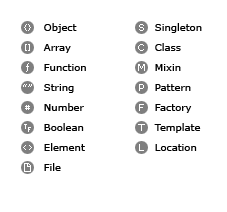
<style>
.page{position:relative;width:227px;height:212px;background:#ffffff}
.page>*{position:absolute;margin:0}
.t1{font:10px/20px "Verdana";color:#000000}
</style>
<div class="page">
<p class="t1" style="left:43px;top:23px;width:43px;height:148px">Object<br>Array<br>Function<br>String<br>Number<br>Boolean<br>Element<br>File</p>
<p class="t1" style="left:154px;top:23px;width:48px;height:128px">Singleton<br>Class<br>Mixin<br>Pattern<br>Factory<br>Template<br>Location</p>
</div>
